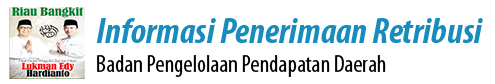
<style>
.page{position:relative;width:495px;height:84px;background:#ffffff}
.page>*{position:absolute;margin:0}
.t1{font:36px "MyriadPro-BoldCondIt";color:#188cbc}
.t2{font:24px "MyriadPro-Cond";color:#000000}
</style>
<div class="page">
<p class="t1" style="left:96px;top:18px;width:387px;height:25px">Informasi Penerimaan Retribusi</p>
<p class="t2" style="left:97px;top:55px;width:289px;height:22px">Badan Pengelolaan Pendapatan Daerah</p>
</div>
